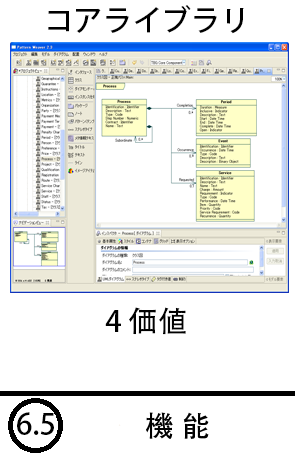
<style>
.page{position:relative;width:295px;height:460px;background:#ffffff}
.page>*{position:absolute;margin:0}
.t1{font:29.3px "AdobeHeitiStd-Regular";color:#000000}
</style>
<div class="page">
<p class="t1" style="left:48px;top:5px;width:196px;height:29px">コアライブラリ</p>
<p class="t1" style="left:105px;top:307px;width:81px;height:28px">4 価値</p>
<p class="t1" style="left:17px;top:412px;width:37px;height:23px">6.5</p>
<p class="t1" style="left:146px;top:412px;width:63px;height:27px">機 能</p>
</div>
